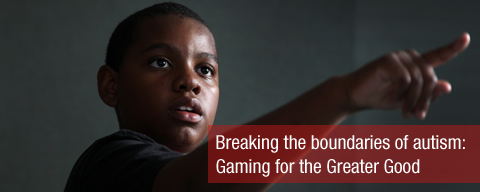
<style>
.page{position:relative;width:480px;height:192px}
.page>*{position:absolute;margin:0}
.t1{font:19.4px "HelveticaNeue-Condensed";color:#ffffff}
</style>
<div class="page">
<p class="t1" style="left:216px;top:135px;width:249px;height:42px">Breaking the boundaries of autism:<br>Gaming for the Greater Good</p>
</div>
